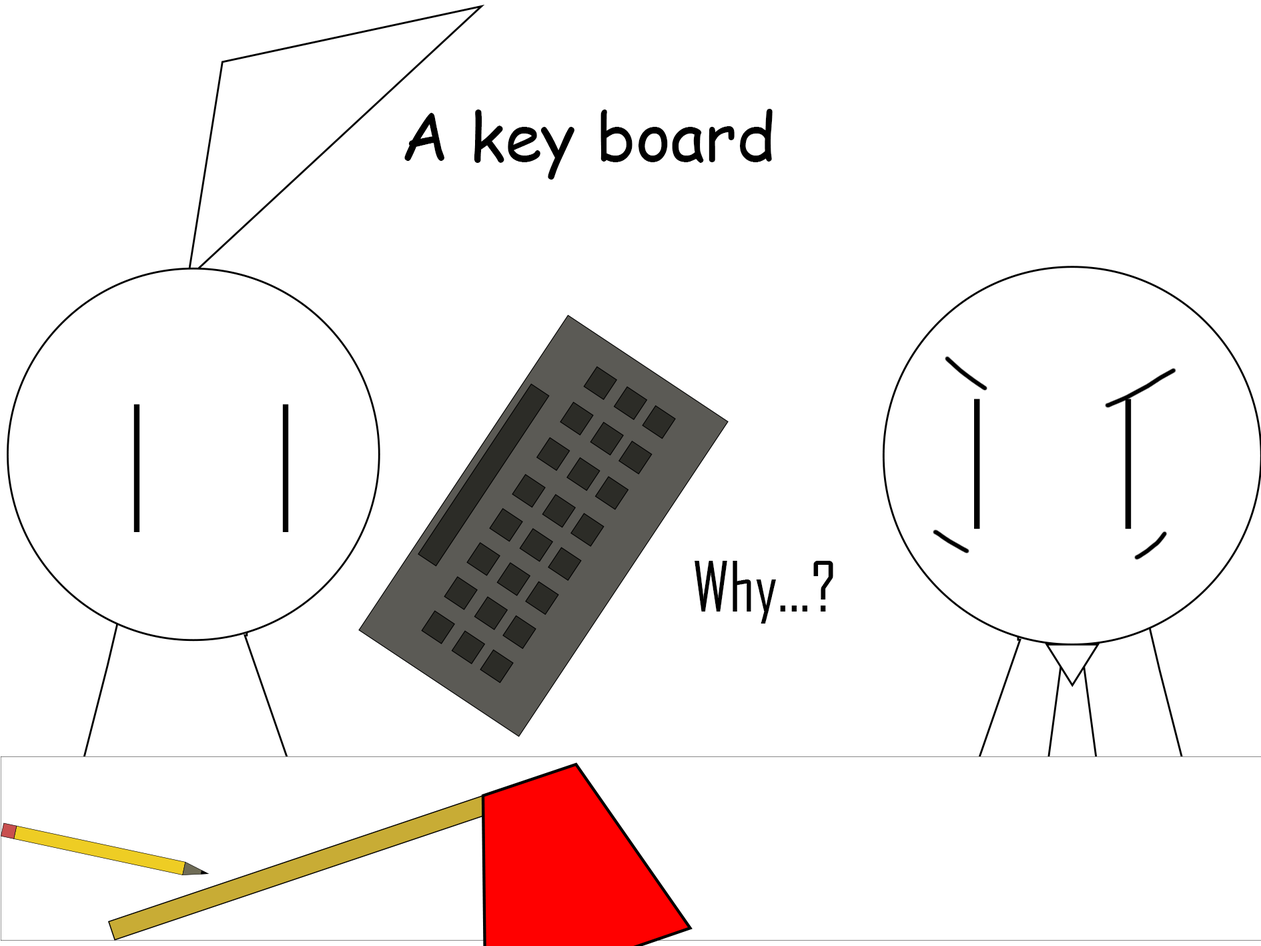
<style>
.page{position:relative;width:1261px;height:946px;background:#ffffff}
.page>*{position:absolute;margin:0}
.t1{font:66.7px "ComicSansMS";color:#000000}
.t2{font:66.7px "AgencyFB-Reg";color:#000000}
</style>
<div class="page">
<p class="t1" style="left:404px;top:109px;width:369px;height:70px">A key board</p>
<p class="t2" style="left:695px;top:561px;width:138px;height:62px">Why...?</p>
</div>
